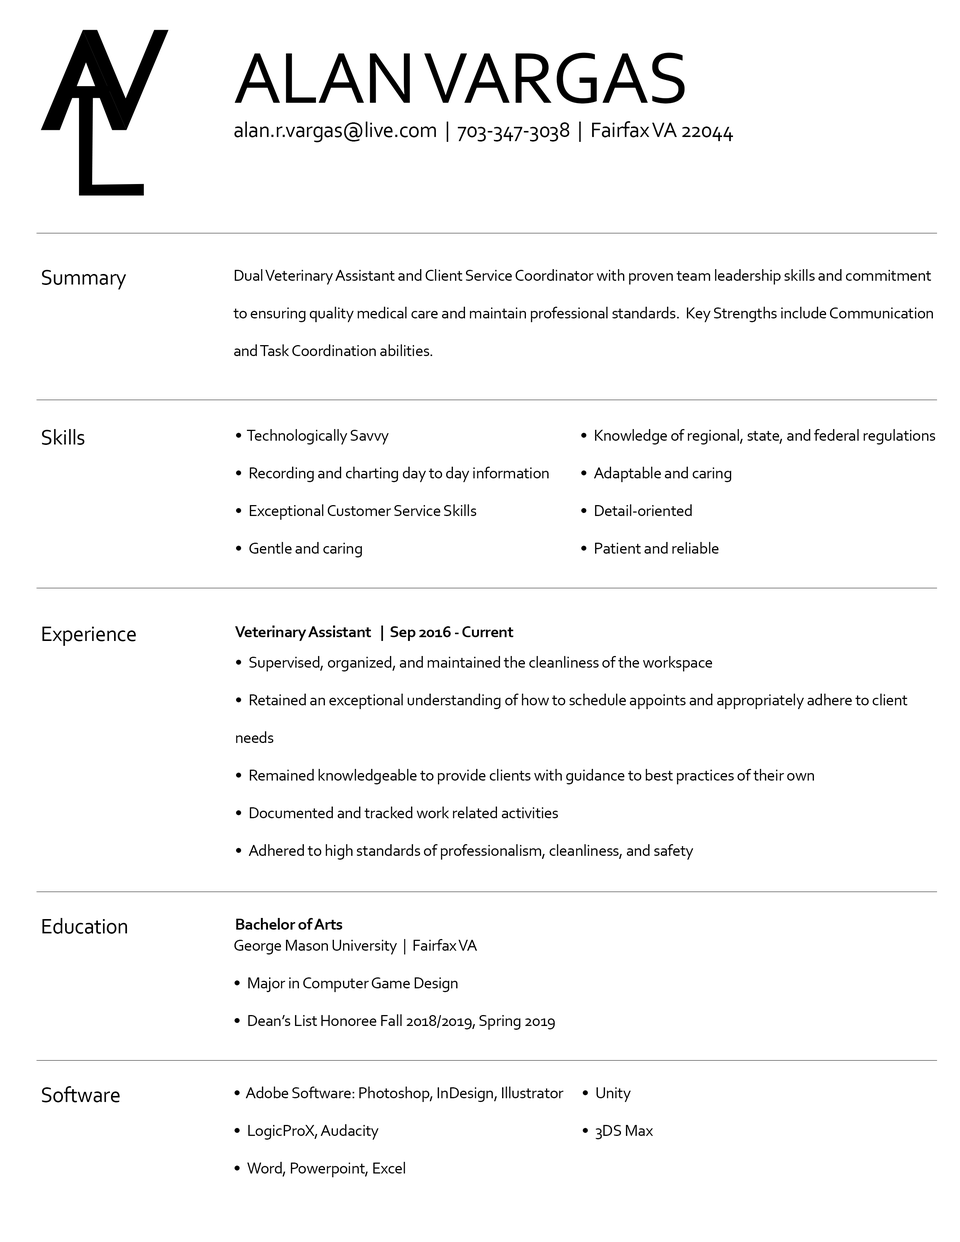
<style>
.page{position:relative;width:960px;height:1242px;background:#ffffff}
.page>*{position:absolute;margin:0}
.t1{font:75.3px "Corbel";letter-spacing:-0.02em;color:#000000}
.t2{font:22px "Corbel";letter-spacing:-0.02em;color:#000000}
.t3{font:16.5px/37.6px "Corbel";letter-spacing:-0.02em;color:#000000}
.t4{font:16.5px "Corbel-Bold";letter-spacing:-0.02em;color:#000000}
</style>
<div class="page">
<p class="t1" style="left:235px;top:53px;width:450px;height:51px">ALAN VARGAS</p>
<p class="t2" style="left:234px;top:121px;width:499px;height:21px">alan.r.vargas@live.com  |  703-347-3038  |  Fairfax VA 22044</p>
<p class="t2" style="left:42px;top:270px;width:84px;height:19px">Summary</p>
<p class="t3" style="left:233px;top:269px;width:700px;height:87px">Dual Veterinary Assistant and Client Service Coordinator with proven team leadership skills and commitment to ensuring quality medical care and maintain professional standards.  Key Strengths include Communication and Task Coordination abilities.</p>
<p class="t2" style="left:42px;top:429px;width:42px;height:16px">Skills</p>
<p class="t3" style="left:236px;top:429px;width:312px;height:129px">•  Technologically Savvy<br>• Recording and charting day to day information<br>• Exceptional Customer Service Skills<br>• Gentle and caring</p>
<p class="t3" style="left:581px;top:429px;width:354px;height:125px">• Knowledge of regional, state, and federal regulations<br>• Adaptable and caring<br>• Detail-oriented <br>• Patient and reliable</p>
<p class="t2" style="left:42px;top:627px;width:94px;height:19px">Experience</p>
<p class="t4" style="left:235px;top:626px;width:278px;height:15px">Veterinary Assistant   |  Sep 2016 - Current</p>
<p class="t3" style="left:236px;top:656px;width:671px;height:204px">• Supervised, organized, and maintained the cleanliness of the workspace<br>• Retained an exceptional understanding of how to schedule appoints and appropriately adhere to client needs<br>• Remained knowledgeable to provide clients with guidance to best practices of their own<br>• Documented and tracked work related activities<br>• Adhered to high standards of professionalism, cleanliness, and safety</p>
<p class="t2" style="left:42px;top:918px;width:85px;height:16px">Education</p>
<p class="t4" style="left:236px;top:918px;width:106px;height:12px">Bachelor of Arts</p>
<p class="t3" style="left:234px;top:939px;width:321px;height:91px">George Mason University  |  Fairfax VA<br>• Major in Computer Game Design<br>• Dean’s List Honoree Fall 2018/2019, Spring 2019</p>
<p class="t2" style="left:42px;top:1086px;width:78px;height:17px">Software</p>
<p class="t3" style="left:235px;top:1087px;width:329px;height:90px">•  Adobe Software: Photoshop, InDesign, Illustrator<br>• LogicProX, Audacity<br>• Word, Powerpoint, Excel</p>
<p class="t3" style="left:583px;top:1088px;width:70px;height:51px">• Unity<br>• 3DS Max</p>
</div>
